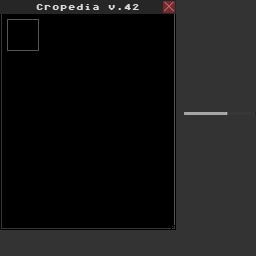
<style>
.page{position:relative;width:256px;height:256px;background:#000000}
.page>*{position:absolute;margin:0}
.t1{font:8px "AtariClassicSmooth";color:#dbdbdb}
</style>
<div class="page">
<p class="t1" style="left:36px;top:4px;width:103px;height:7px">Cropedia v.42</p>
</div>
